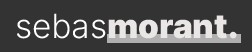
<style>
.page{position:relative;width:252px;height:52px;background:#333333}
.page>*{position:absolute;margin:0}
.t1{font:33.3px "Inter-Black";color:#eae6e6}
.t2{font:33.3px "Inter-Light";color:#ffffff}
</style>
<div class="page">
<p class="t1" style="left:17px;top:13px;width:220px;height:26px"><span class="t2">sebas</span>morant.</p>
</div>
